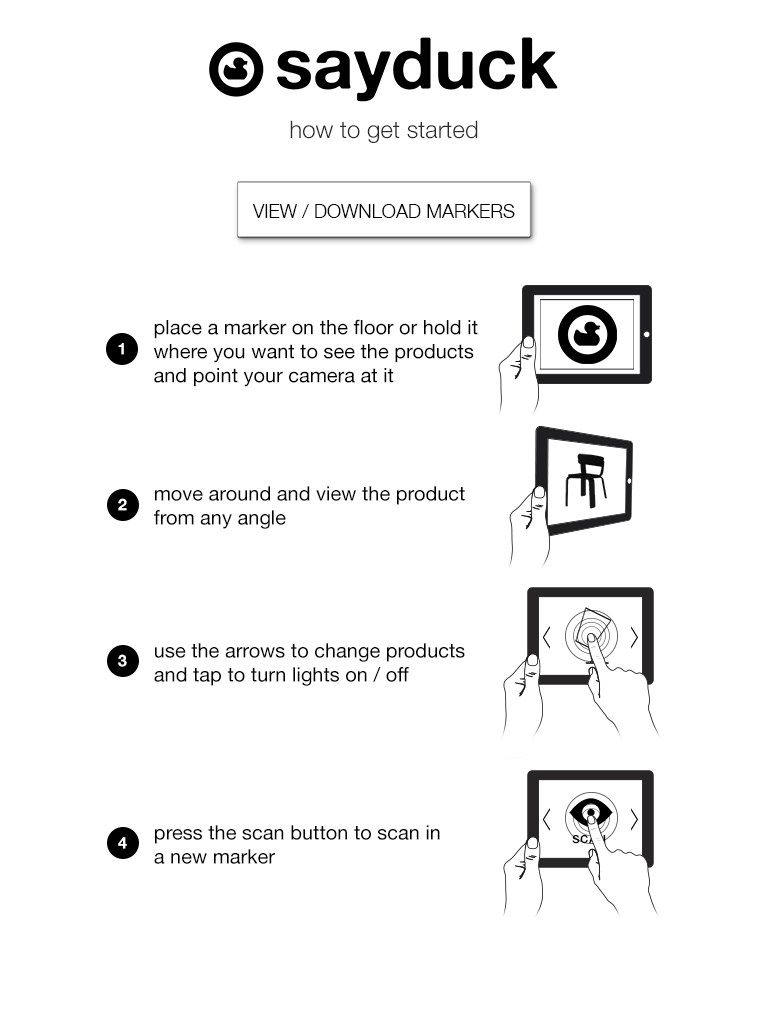
<style>
.page{position:relative;width:768px;height:1024px;background:#ffffff}
.page>*{position:absolute;margin:0}
.t1{font:24px "HelveticaNeue-Light";color:#2b2b2b}
.t2{font:19px "HelveticaNeue-Light";color:#000000}
.t3{font:20px "HelveticaNeue";color:#000000}
.t4{font:16px "HelveticaNeue-Bold";color:#ffffff}
.t5{font:11.3px "AlteHaasGrotesk_Bold";letter-spacing:0.05em}
</style>
<div class="page">
<p class="t1" style="left:290px;top:120px;width:188px;height:23px">how to get started</p>
<p class="t2" style="left:252px;top:204px;width:263px;height:14px">VIEW / DOWNLOAD MARKERS</p>
<p class="t3" style="left:153px;top:319px;width:325px;height:68px">place a marker on the floor or hold it<br>where you want to see the products<br>and point your camera at it</p>
<p class="t4" style="left:118px;top:343px;width:6px;height:12px">1</p>
<p class="t3" style="left:154px;top:486px;width:311px;height:43px">move around and view the product<br>from any angle</p>
<p class="t4" style="left:118px;top:498px;width:9px;height:13px">2</p>
<p class="t4" style="left:118px;top:654px;width:9px;height:13px">3</p>
<p class="t3" style="left:154px;top:643px;width:311px;height:43px">use the arrows to change products<br>and tap to turn lights on / off</p>
<p class="t3" style="left:154px;top:825px;width:286px;height:39px">press the scan button to scan in<br>a new marker</p>
<p class="t4" style="left:118px;top:837px;width:9px;height:12px">4</p>
<p class="t5" style="left:572px;top:835px;width:34px;height:9px">SCAN</p>
</div>
